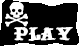
<style>
.page{position:relative;width:80px;height:46px;background:#000000}
.page>*{position:absolute;margin:0}
.t1{font:18px "old+sailor";color:#ffffff}
</style>
<div class="page">
<p class="t1" style="left:14px;top:27px;width:59px;height:14px">Play</p>
</div>
